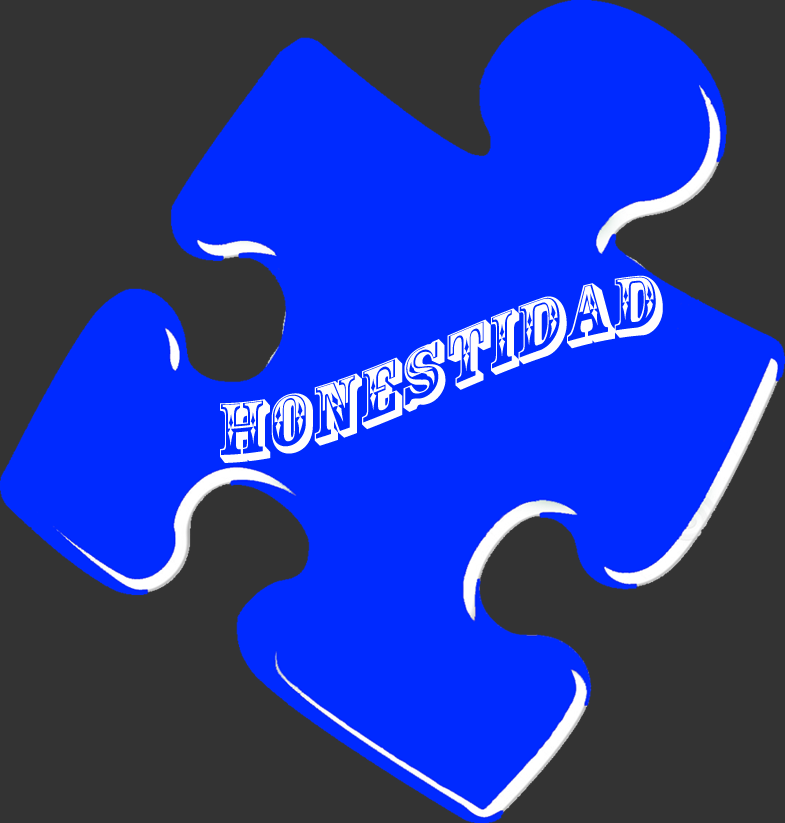
<style>
.page{position:relative;width:785px;height:823px;background:#002aff}
.page>*{position:absolute;margin:0}
.t1{font:80px "RosewoodStd-Regular";color:#fffefe}
</style>
<div class="page">
<p class="t1" style="left:220px;top:275px;width:443px;height:188px">Honestidad</p>
</div>
